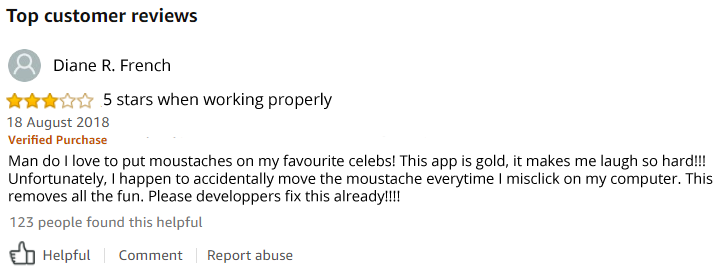
<style>
.page{position:relative;width:722px;height:277px;background:#ffffff}
.page>*{position:absolute;margin:0}
.t1{font:16.2px "OpenSans";color:#000000}
.t2{font:14.7px "OpenSans";color:#000000}
</style>
<div class="page">
<p class="t1" style="left:54px;top:58px;width:116px;height:14px">Diane R. French</p>
<p class="t1" style="left:104px;top:92px;width:228px;height:17px">5 stars when working properly</p>
<p class="t2" style="left:9px;top:154px;width:704px;height:51px">Man do I love to put moustaches on my favourite celebs! This app is gold, it makes me laugh so hard!!! <br>Unfortunately, I happen to accidentally move the moustache everytime I misclick on my computer. This <br>removes all the fun. Please developpers fix this already!!!!</p>
</div>
